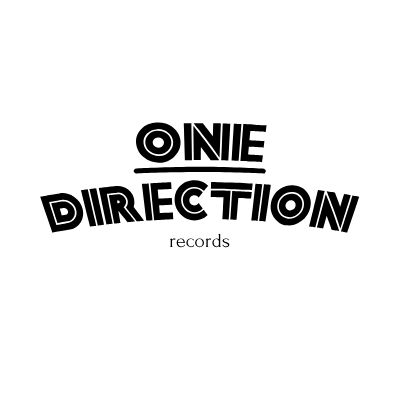
<style>
.page{position:relative;width:400px;height:400px;background:#ffffff}
.page>*{position:absolute;margin:0}
.t1{font:48px "FortySecondStreetHB";color:#000000}
.t2{font:20px "Forum";color:#000000}
</style>
<div class="page">
<p class="t1" style="left:40px;top:122px;width:320px;height:111px;text-align:center">one<br>direction</p>
<p class="t2" style="left:170px;top:233px;width:60px;height:15px">records</p>
</div>
